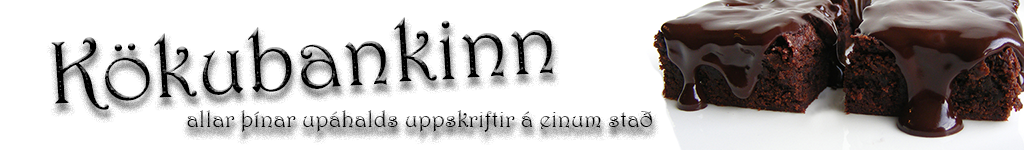
<style>
.page{position:relative;width:1024px;height:150px;background:#ffffff}
.page>*{position:absolute;margin:0}
.t1{font:90px "Harrington";color:#000000}
.t2{font:24px "Harrington"}
</style>
<div class="page">
<p class="t1" style="left:51px;top:17px;width:502px;height:93px;rotate:-4deg">Kökubankinn</p>
<p class="t2" style="left:187px;top:110px;width:465px;height:22px">allar þínar upáhalds uppskriftir á einum stað</p>
</div>
